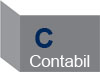
<style>
.page{position:relative;width:100px;height:72px;background:#7f8084}
.page>*{position:absolute;margin:0}
.t1{font:16.7px "ArialMT";color:#fcfcfd}
</style>
<div class="page">
<p class="t1" style="left:30px;top:55px;width:60px;height:12px">Contabil</p>
</div>
